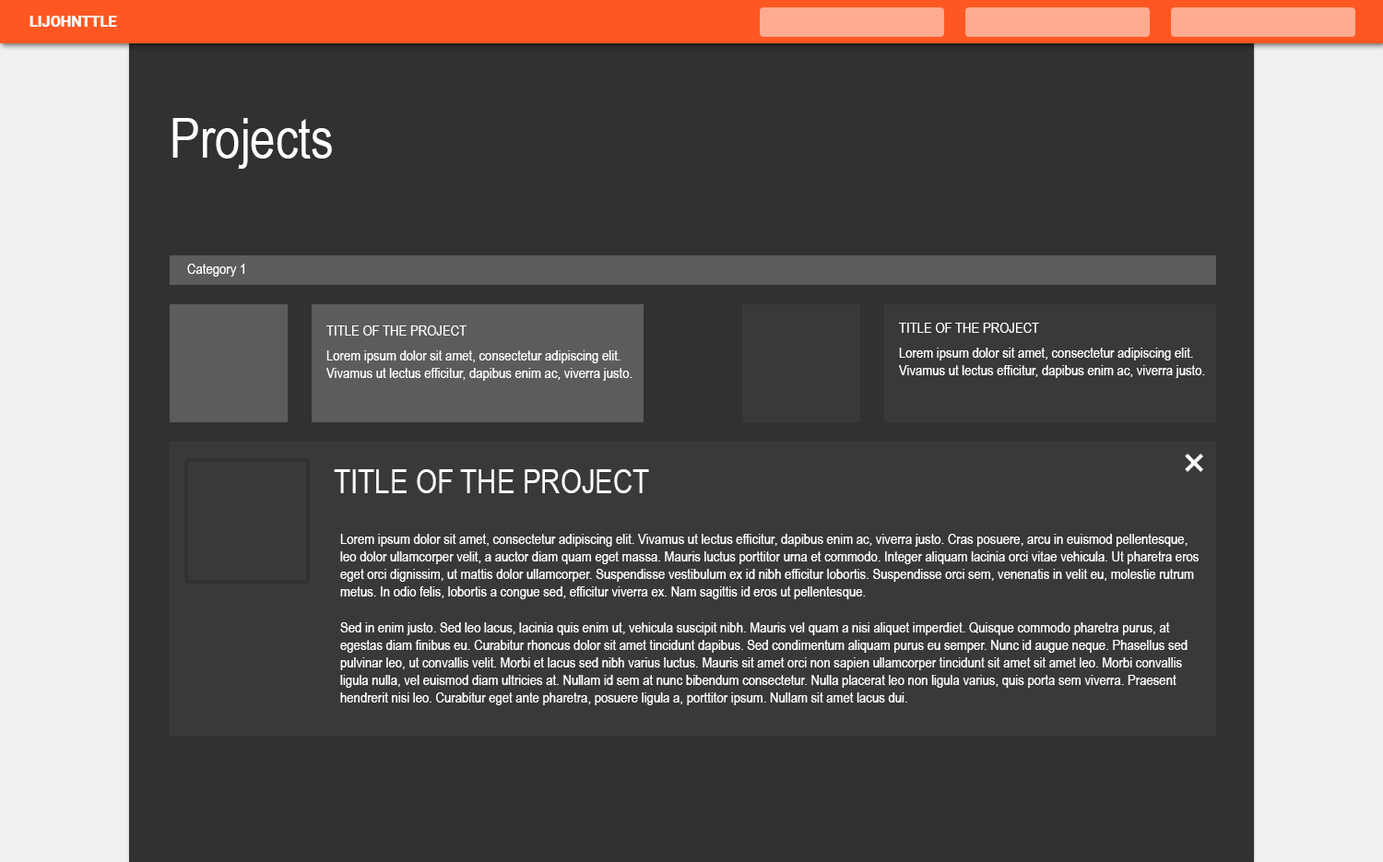
<style>
.page{position:relative;width:1383px;height:862px;background:#313131}
.page>*{position:absolute;margin:0}
.t1{font:55.3px "ArialNarrow";color:#ffffff}
.t2{font:14.8px "ArialNarrow";color:#ffffff}
.t3{font:33.2px "ArialNarrow";color:#ffffff}
</style>
<div class="page">
<p class="t1" style="left:172px;top:118px;width:160px;height:51px">Projects</p>
<p class="t2" style="left:187px;top:264px;width:57px;height:13px">Category 1</p>
<p class="t2" style="left:326px;top:325px;width:141px;height:11px">TITLE OF THE PROJECT</p>
<p class="t2" style="left:899px;top:323px;width:140px;height:10px">TITLE OF THE PROJECT</p>
<p class="t2" style="left:326px;top:350px;width:307px;height:31px">Lorem ipsum dolor sit amet, consectetur adipiscing elit.<br>Vivamus ut lectus efficitur, dapibus enim ac, viverra justo.</p>
<p class="t2" style="left:899px;top:348px;width:306px;height:30px">Lorem ipsum dolor sit amet, consectetur adipiscing elit.<br>Vivamus ut lectus efficitur, dapibus enim ac, viverra justo.</p>
<p class="t3" style="left:334px;top:469px;width:315px;height:24px">TITLE OF THE PROJECT</p>
<p class="t2" style="left:340px;top:534px;width:859px;height:171px">Lorem ipsum dolor sit amet, consectetur adipiscing elit. Vivamus ut lectus efficitur, dapibus enim ac, viverra justo. Cras posuere, arcu in euismod pellentesque,<br>leo dolor ullamcorper velit, a auctor diam quam eget massa. Mauris luctus porttitor urna et commodo. Integer aliquam lacinia orci vitae vehicula. Ut pharetra eros<br>eget orci dignissim, ut mattis dolor ullamcorper. Suspendisse vestibulum ex id nibh efficitur lobortis. Suspendisse orci sem, venenatis in velit eu, molestie rutrum<br>metus. In odio felis, lobortis a congue sed, efficitur viverra ex. Nam sagittis id eros ut pellentesque.<br><br>Sed in enim justo. Sed leo lacus, lacinia quis enim ut, vehicula suscipit nibh. Mauris vel quam a nisi aliquet imperdiet. Quisque commodo pharetra purus, at<br>egestas diam finibus eu. Curabitur rhoncus dolor sit amet tincidunt dapibus. Sed condimentum aliquam purus eu semper. Nunc id augue neque. Phasellus sed<br>pulvinar leo, ut convallis velit. Morbi et lacus sed nibh varius luctus. Mauris sit amet orci non sapien ullamcorper tincidunt sit amet sit amet leo. Morbi convallis<br>ligula nulla, vel euismod diam ultricies at. Nullam id sem at nunc bibendum consectetur. Nulla placerat leo non ligula varius, quis porta sem viverra. Praesent<br>hendrerit nisi leo. Curabitur eget ante pharetra, posuere ligula a, porttitor ipsum. Nullam sit amet lacus dui.</p>
</div>
